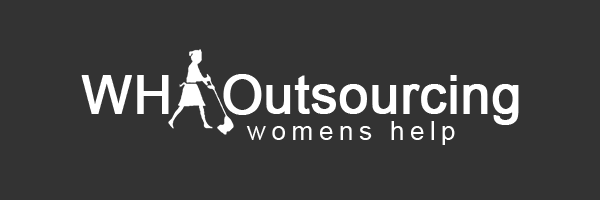
<style>
.page{position:relative;width:600px;height:200px;background:#333333}
.page>*{position:absolute;margin:0}
.t1{font:52.9px "ArialMT";color:#ffffff;font-weight:bold}
.t2{font:26.5px "ArialMT";letter-spacing:0.2em;color:#ffffff}
</style>
<div class="page">
<p class="t1" style="left:81px;top:74px;width:438px;height:51px">WH   Outsourcing</p>
<p class="t2" style="left:246px;top:121px;width:209px;height:24px">womens help</p>
</div>
